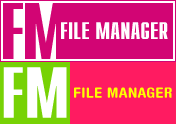
<style>
.page{position:relative;width:176px;height:124px;background:#d20574}
.page>*{position:absolute;margin:0}
.t1{font:24px "CompactC-Bold";color:#ffffff}
</style>
<div class="page">
<p class="t1" style="left:61px;top:22px;width:107px;height:17px">FILE MANAGER</p>
</div>
